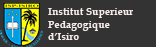
<style>
.page{position:relative;width:156px;height:47px;background:#333333}
.page>*{position:absolute;margin:0}
.t1{font:10.4px "BookAntiqua-Bold";color:#f7eaea}
</style>
<div class="page">
<p class="t1" style="left:48px;top:8px;width:85px;height:32px">Institut Superieur<br>Pedagogique <br>d’Isiro</p>
</div>
